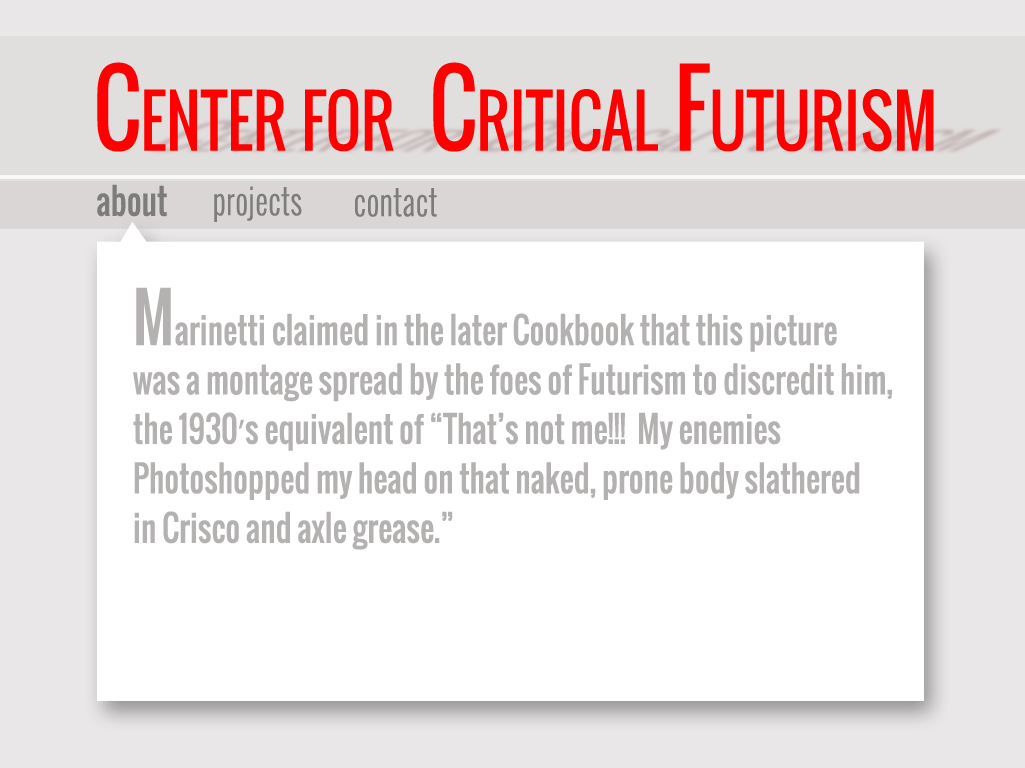
<style>
.page{position:relative;width:1025px;height:768px;background:#ffffff}
.page>*{position:absolute;margin:0}
.t1{font:35.2px "Oswald";color:#7d7c7c;font-weight:bold;scale:0.88 1}
.t2{font:35.2px "Oswald-Light";color:#7d7c7c;font-weight:bold;scale:0.88 1}
.t3{font:35.2px/49.5px "Oswald";color:#b4b1b1;font-weight:bold;scale:0.88 1}
.t4{font:65px/49.5px "Oswald";color:#b4b1b1;font-weight:bold;scale:0.88 1}
.t5{font:35.2px/49.5px "MyriadPro-Regular";color:#b4b1b1;font-weight:bold;scale:0.88 1}
</style>
<div class="page">
<p class="t1" style="left:97px;top:184px;width:70px;height:33px">about</p>
<p class="t2" style="left:214px;top:186px;width:88px;height:36px">projects</p>
<p class="t2" style="left:355px;top:188px;width:82px;height:29px">contact</p>
<p class="t3" style="left:133px;top:287px;width:759px;height:263px"><span class="t4">M</span>arinetti claimed in the later Cookbook that this picture <br>was a montage spread by the foes of Futurism to discredit him,<br>the 1930<span class="t5">’</span>s equivalent of “That’s not me!!!  My enemies<br>Photoshopped my head on that naked, prone body slathered <br>in Crisco and axle grease.”</p>
</div>
